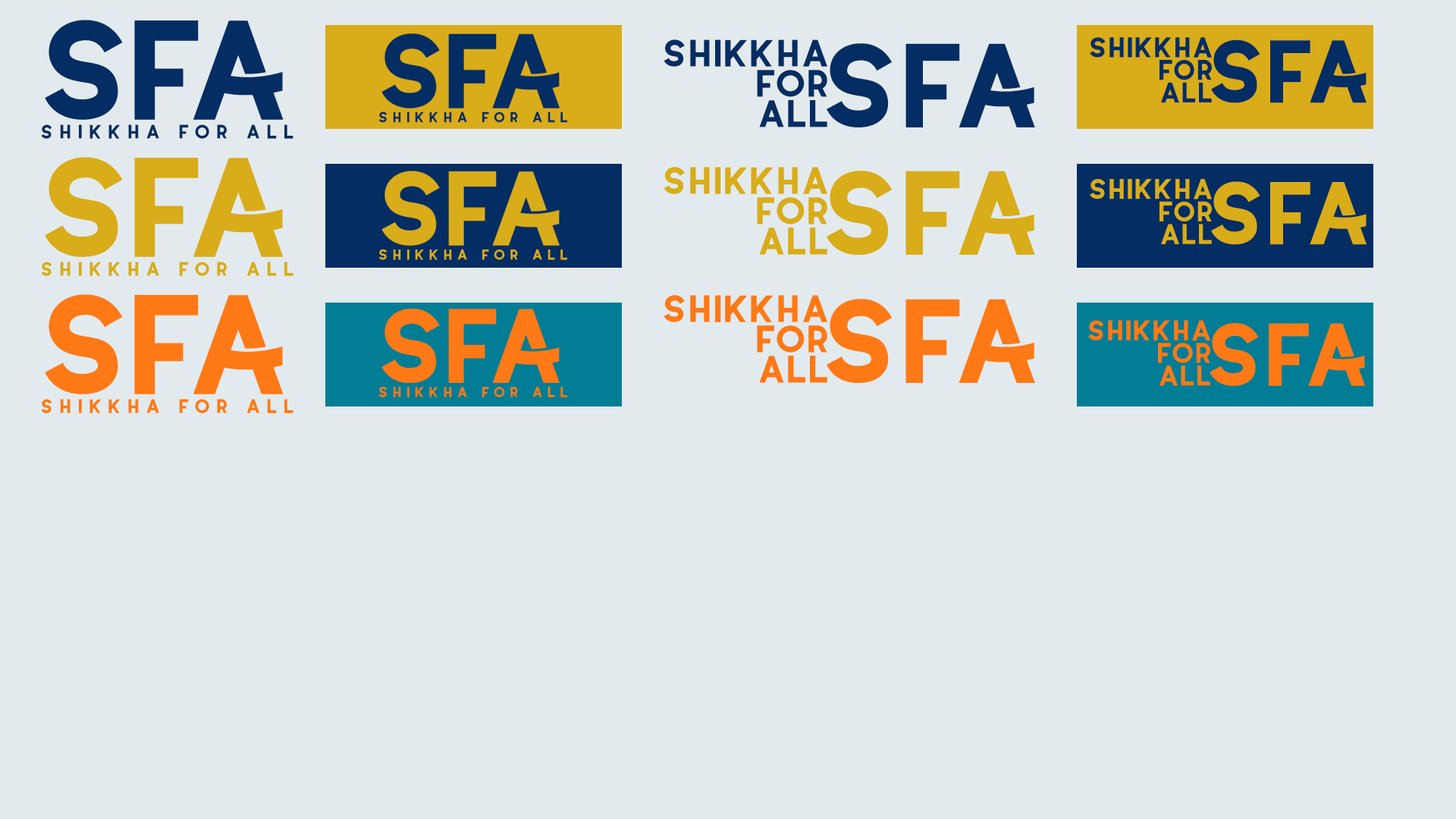
<style>
.page{position:relative;width:1456px;height:819px;background:#e3eaee}
.page>*{position:absolute;margin:0}
.t1{font:38.2px/30.2px "Coyote-SemiBoldDEMO";letter-spacing:-0.15em;color:#032d63}
.t2{font:28.5px/22.5px "Coyote-SemiBoldDEMO";letter-spacing:-0.15em;color:#032d63}
.t3{font:89.1px "Coyote-SemiBoldDEMO";letter-spacing:-0.15em;color:#032d63}
.t4{font:119.4px "Coyote-SemiBoldDEMO";letter-spacing:-0.15em;color:#032d63}
.t5{font:14.6px "Coyote-SemiBoldDEMO";letter-spacing:0.14em;color:#032d63}
.t6{font:19.5px "Coyote-SemiBoldDEMO";letter-spacing:0.14em;color:#032d63}
.t7{font:38.2px/30.2px "Coyote-SemiBoldDEMO";letter-spacing:-0.15em;color:#d9ac1a}
.t8{font:119.4px "Coyote-SemiBoldDEMO";letter-spacing:-0.15em;color:#d9ac1a}
.t9{font:28.5px/22.5px "Coyote-SemiBoldDEMO";letter-spacing:-0.15em;color:#d9ac1a}
.t10{font:89.1px "Coyote-SemiBoldDEMO";letter-spacing:-0.15em;color:#d9ac1a}
.t11{font:14.6px "Coyote-SemiBoldDEMO";letter-spacing:0.14em;color:#d9ac1a}
.t12{font:19.5px "Coyote-SemiBoldDEMO";letter-spacing:0.14em;color:#d9ac1a}
.t13{font:38.2px/30.2px "Coyote-SemiBoldDEMO";letter-spacing:-0.15em;color:#ff7916}
.t14{font:119.4px "Coyote-SemiBoldDEMO";letter-spacing:-0.15em;color:#ff7916}
.t15{font:28.5px/22.5px "Coyote-SemiBoldDEMO";letter-spacing:-0.15em;color:#ff7916}
.t16{font:89.1px "Coyote-SemiBoldDEMO";letter-spacing:-0.15em;color:#ff7916}
.t17{font:14.6px "Coyote-SemiBoldDEMO";letter-spacing:0.14em;color:#ff7916}
.t18{font:19.5px "Coyote-SemiBoldDEMO";letter-spacing:0.14em;color:#ff7916}
</style>
<div class="page">
<p class="t1" style="left:664px;top:39px;width:163px;height:88px;text-align:right">shikkha<br>for<br>all</p>
<p class="t2" style="left:1090px;top:37px;width:122px;height:66px;text-align:right">shikkha<br>for<br>all</p>
<p class="t3" style="left:1211px;top:39px;width:155px;height:64px">SfA</p>
<p class="t4" style="left:827px;top:43px;width:208px;height:84px">SfA</p>
<p class="t5" style="left:378px;top:111px;width:189px;height:12px">shikkha for all</p>
<p class="t6" style="left:41px;top:124px;width:252px;height:15px">shikkha for all</p>
<p class="t7" style="left:664px;top:167px;width:163px;height:88px;text-align:right">shikkha<br>for<br>all</p>
<p class="t8" style="left:827px;top:171px;width:208px;height:84px">SfA</p>
<p class="t9" style="left:1090px;top:179px;width:122px;height:65px;text-align:right">shikkha<br>for<br>all</p>
<p class="t10" style="left:1211px;top:181px;width:155px;height:64px">SfA</p>
<p class="t11" style="left:378px;top:249px;width:189px;height:11px">shikkha for all</p>
<p class="t12" style="left:41px;top:262px;width:252px;height:14px">shikkha for all</p>
<p class="t13" style="left:664px;top:295px;width:163px;height:88px;text-align:right">shikkha<br>for<br>all</p>
<p class="t14" style="left:827px;top:299px;width:208px;height:84px">SfA</p>
<p class="t15" style="left:1088px;top:320px;width:122px;height:66px;text-align:right">shikkha<br>for<br>all</p>
<p class="t16" style="left:1210px;top:323px;width:155px;height:63px">SfA</p>
<p class="t17" style="left:378px;top:387px;width:189px;height:10px">shikkha for all</p>
<p class="t18" style="left:41px;top:399px;width:252px;height:14px">shikkha for all</p>
</div>
